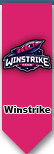
<style>
.page{position:relative;width:54px;height:154px;background:#d9226b}
.page>*{position:absolute;margin:0}
.t1{font:9.2px "Arial-Black";letter-spacing:-0.01em;color:#000000}
</style>
<div class="page">
<p class="t1" style="left:4px;top:106px;width:47px;height:7px">Winstrike</p>
</div>
